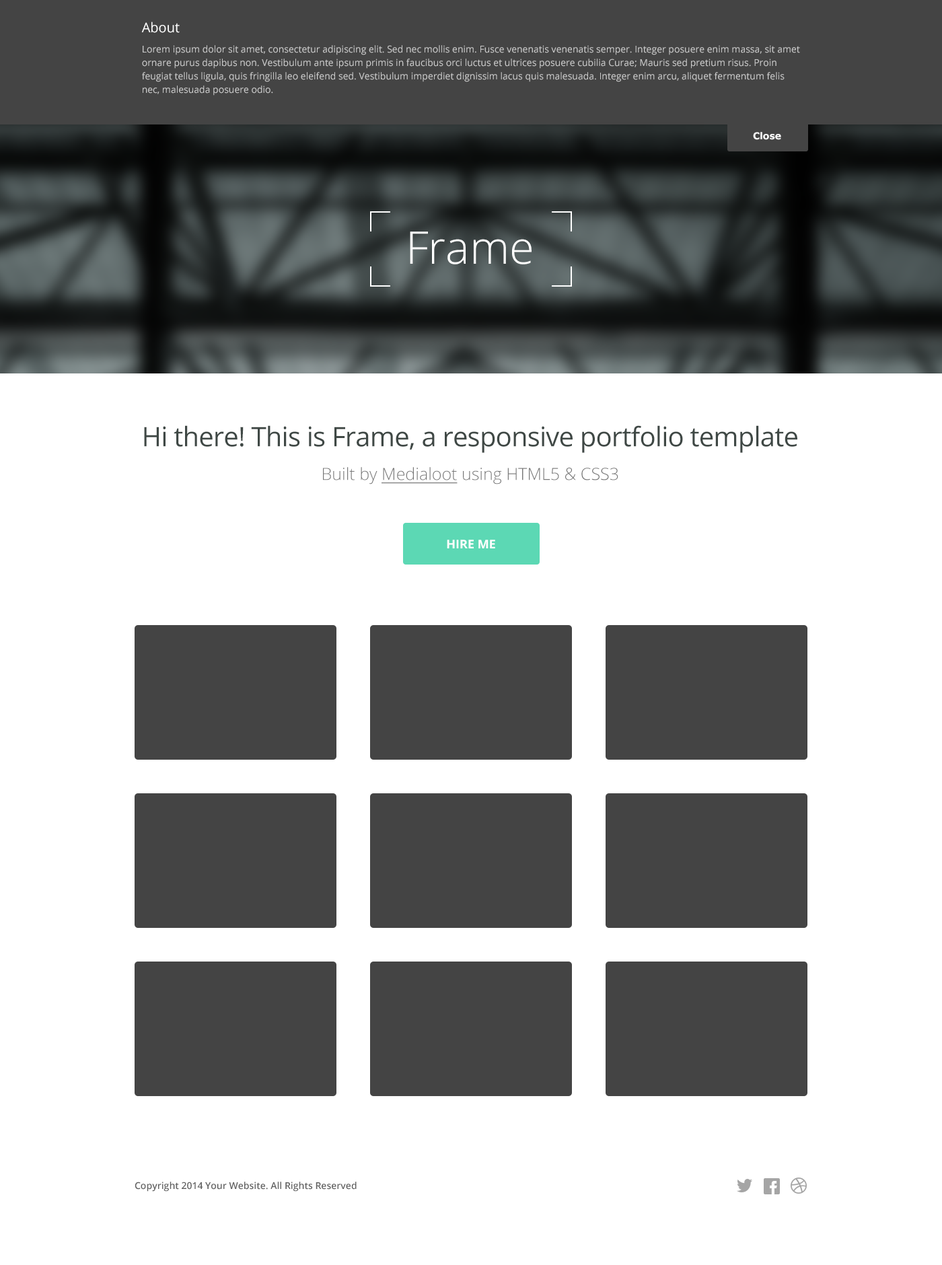
<style>
.page{position:relative;width:942px;height:1265px;background:#ffffff}
.page>*{position:absolute;margin:0}
.t1{font:9.4px/13.5px "OpenSans";color:#cccccc}
.t2{font:13.5px/13.5px "OpenSans";color:#ffffff}
.t3{font:9.4px/20.2px "OpenSans";color:#cccccc}
.t4{font:9.4px "Verdana-Bold";color:#ffffff}
.t5{font:45.1px "OpenSans-Light";color:#ffffff}
.t6{font:26.9px "OpenSans";letter-spacing:-0.02em;color:#3f4845}
.t7{font:16.8px "OpenSans-Light";color:#777777}
.t8{font:16.8px "OpenSans-Light";color:#777777;text-decoration:underline}
.t9{font:12.1px "OpenSans-Bold";color:#ffffff}
.t10{font:9.4px "OpenSans-Semibold";color:#616161}
</style>
<div class="page">
<p class="t1" style="left:141px;top:22px;width:659px;height:74px"><span class="t2">About<br></span><span class="t3">L</span>orem ipsum dolor sit amet, consectetur adipiscing elit. Sed nec mollis enim. Fusce venenatis venenatis semper. Integer posuere enim massa, sit amet ornare purus dapibus non. Vestibulum ante ipsum primis in faucibus orci luctus et ultrices posuere cubilia Curae; Mauris sed pretium risus. Proin feugiat tellus ligula, quis fringilla leo eleifend sed. Vestibulum imperdiet dignissim lacus quis malesuada. Integer enim arcu, aliquet fermentum felis nec, malesuada posuere odio.</p>
<p class="t4" style="left:753px;top:132px;width:28px;height:8px">Close</p>
<p class="t5" style="left:410px;top:232px;width:122px;height:33px">Frame</p>
<p class="t6" style="left:144px;top:425px;width:654px;height:28px">Hi there! This is Frame, a responsive portfolio template</p>
<p class="t7" style="left:323px;top:467px;width:296px;height:18px">Built by <span class="t8">Medialoot</span> using HTML5 &amp; CSS3</p>
<p class="t9" style="left:447px;top:540px;width:48px;height:9px">HIRE ME</p>
<p class="t10" style="left:135px;top:1182px;width:222px;height:10px">Copyright 2014 Your Website. All Rights Reserved</p>
</div>
